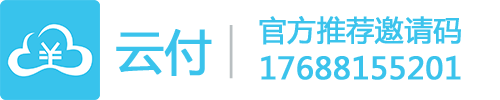
<style>
.page{position:relative;width:500px;height:100px;background:#ffffff}
.page>*{position:absolute;margin:0}
.t1{font:28.4px "MicrosoftYaHei";color:#39c3ec;font-weight:bold}
.t2{font:48px "MicrosoftYaHei";color:#39c3ec;font-weight:bold}
.t3{font:48.6px "MicrosoftYaHei";color:#b9bfc1;font-weight:bold;scale:0.49 1}
.t4{font:30.2px "MicrosoftYaHei";color:#39c3ec;font-weight:bold}
</style>
<div class="page">
<p class="t1" style="left:259px;top:16px;width:202px;height:29px">官方推荐邀请码</p>
<p class="t2" style="left:116px;top:29px;width:96px;height:47px">云付</p>
<p class="t3" style="left:229px;top:25px;width:4px;height:54px">|</p>
<p class="t4" style="left:261px;top:55px;width:200px;height:25px">17688155201</p>
</div>
